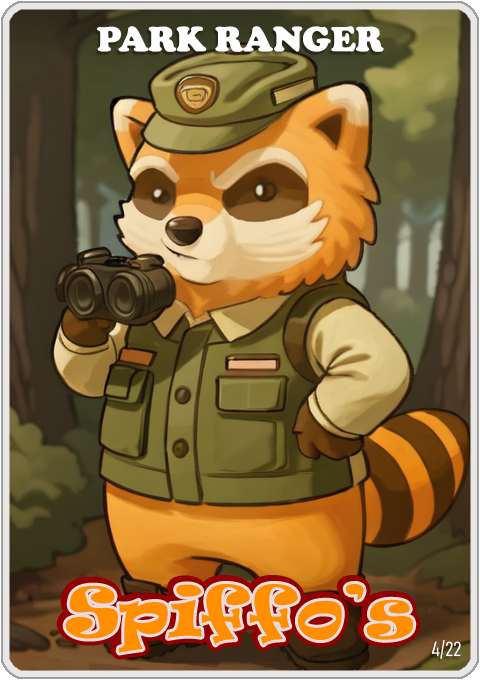
<style>
.page{position:relative;width:480px;height:680px}
.page>*{position:absolute;margin:0}
.t1{font:36px "CooperBlack";color:#ffffff}
.t2{font:65px "Ravie";color:#ff8e00}
.t3{font:20px "Bahnschrift-LightCondensed";color:#ffffff}
</style>
<div class="page">
<p class="t1" style="left:97px;top:26px;width:287px;height:26px">PARK RANGER</p>
<p class="t2" style="left:65px;top:584px;width:349px;height:69px">Spiffo’s</p>
<p class="t3" style="left:432px;top:640px;width:29px;height:19px">4/22</p>
</div>
